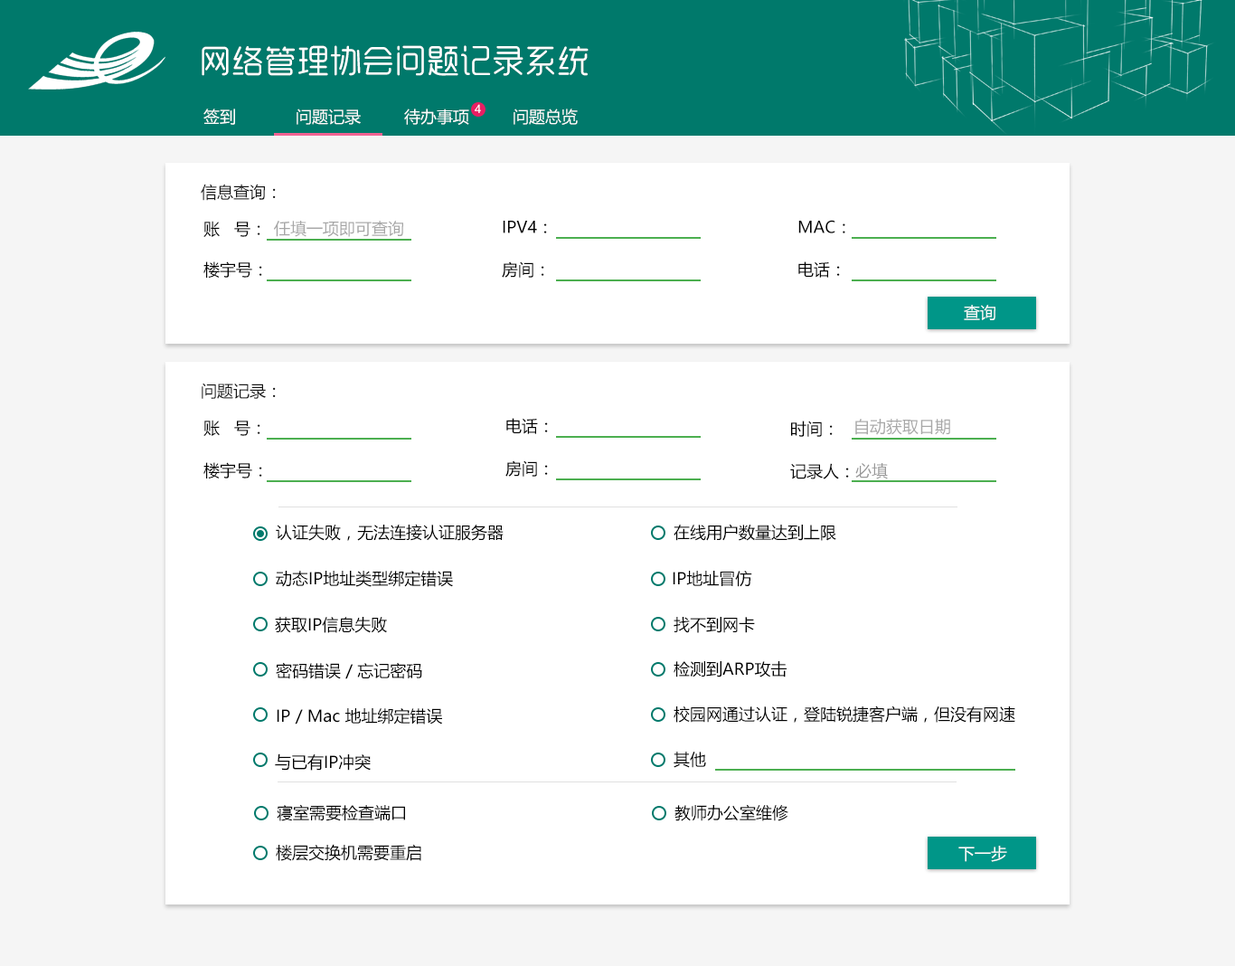
<style>
.page{position:relative;width:1235px;height:966px;background:#ffffff}
.page>*{position:absolute;margin:0}
.t1{font:32.5px "MFYueYuan_Noncommercial-Regular";color:#ffffff}
.t2{font:16.3px "MicrosoftYaHeiUI";color:#ffffff}
.t3{font:10.8px "MicrosoftYaHeiUI";color:#ffffff}
.t4{font:16.3px "MicrosoftYaHeiUI";color:#161616}
.t5{font:16.3px "MicrosoftYaHeiUI";color:#000000}
.t6{font:16.3px "MicrosoftYaHeiUI";color:#a6a6a6}
.t7{font:16.3px "MicrosoftYaHeiUI";color:#a8a8a8}
.t8{font:16.3px "MicrosoftYaHeiUI";color:#989898}
</style>
<div class="page">
<p class="t1" style="left:202px;top:45px;width:387px;height:31px">网络管理协会问题记录系统</p>
<p class="t2" style="left:203px;top:108px;width:32px;height:17px">签到</p>
<p class="t2" style="left:297px;top:108px;width:64px;height:17px">问题记录</p>
<p class="t2" style="left:404px;top:108px;width:65px;height:17px">待办事项</p>
<p class="t3" style="left:475px;top:104px;width:6px;height:9px">4</p>
<p class="t2" style="left:514px;top:108px;width:64px;height:17px">问题总览</p>
<p class="t4" style="left:201px;top:184px;width:75px;height:17px">信息查询：</p>
<p class="t5" style="left:203px;top:221px;width:57px;height:16px">账   号：</p>
<p class="t6" style="left:274px;top:221px;width:129px;height:16px">任填一项即可查询</p>
<p class="t5" style="left:503px;top:221px;width:44px;height:12px">IPV4：</p>
<p class="t5" style="left:798px;top:220px;width:47px;height:13px">MAC：</p>
<p class="t5" style="left:203px;top:261px;width:59px;height:17px">楼宇号：</p>
<p class="t5" style="left:502px;top:261px;width:42px;height:17px">房间：</p>
<p class="t5" style="left:798px;top:261px;width:42px;height:17px">电话：</p>
<p class="t2" style="left:964px;top:305px;width:31px;height:15px">查询</p>
<p class="t4" style="left:202px;top:382px;width:74px;height:17px">问题记录：</p>
<p class="t5" style="left:203px;top:419px;width:57px;height:17px">账   号：</p>
<p class="t5" style="left:506px;top:418px;width:42px;height:16px">电话：</p>
<p class="t5" style="left:791px;top:420px;width:42px;height:17px">时间：</p>
<p class="t7" style="left:855px;top:419px;width:95px;height:16px">自动获取日期</p>
<p class="t5" style="left:203px;top:462px;width:59px;height:16px">楼宇号：</p>
<p class="t5" style="left:505px;top:460px;width:43px;height:16px">房间：</p>
<p class="t5" style="left:790px;top:463px;width:59px;height:16px">记录人：</p>
<p class="t8" style="left:855px;top:463px;width:33px;height:16px">必填</p>
<p class="t5" style="left:276px;top:523px;width:228px;height:18px">认证失败，无法连接认证服务器</p>
<p class="t5" style="left:674px;top:523px;width:162px;height:18px">在线用户数量达到上限</p>
<p class="t5" style="left:276px;top:570px;width:177px;height:17px">动态IP地址类型绑定错误</p>
<p class="t5" style="left:673px;top:570px;width:79px;height:17px">IP地址冒仿</p>
<p class="t5" style="left:275px;top:617px;width:112px;height:16px">获取IP信息失败</p>
<p class="t5" style="left:674px;top:617px;width:81px;height:16px">找不到网卡</p>
<p class="t5" style="left:276px;top:662px;width:146px;height:17px">密码错误 / 忘记密码</p>
<p class="t5" style="left:674px;top:661px;width:113px;height:16px">检测到ARP攻击</p>
<p class="t5" style="left:277px;top:708px;width:165px;height:16px">IP / Mac 地址绑定错误</p>
<p class="t5" style="left:674px;top:705px;width:341px;height:17px">校园网通过认证，登陆锐捷客户端，但没有网速</p>
<p class="t5" style="left:275px;top:753px;width:96px;height:17px">与已有IP冲突</p>
<p class="t5" style="left:674px;top:751px;width:32px;height:17px">其他</p>
<p class="t5" style="left:277px;top:804px;width:128px;height:17px">寝室需要检查端口</p>
<p class="t5" style="left:674px;top:804px;width:114px;height:17px">教师办公室维修</p>
<p class="t5" style="left:276px;top:844px;width:145px;height:17px">楼层交换机需要重启</p>
<p class="t2" style="left:958px;top:845px;width:49px;height:17px">下一步</p>
</div>
